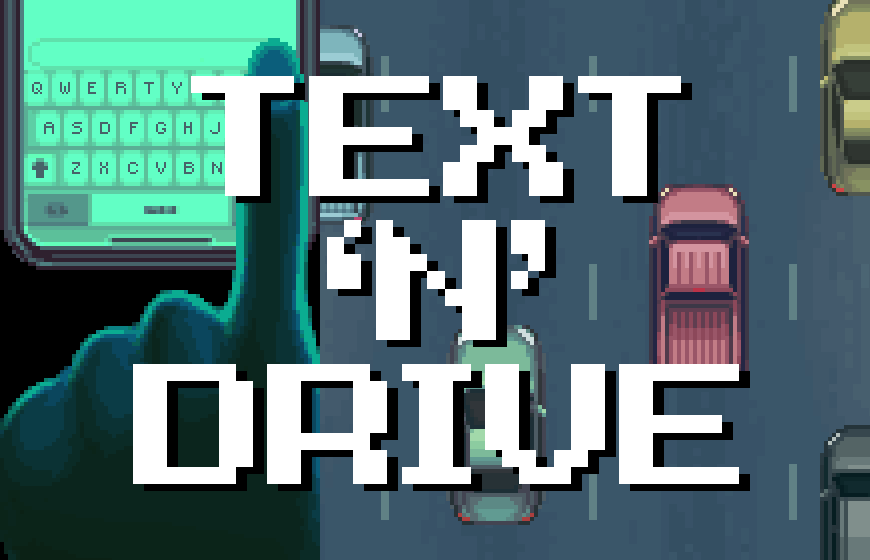
<style>
.page{position:relative;width:870px;height:560px}
.page>*{position:absolute;margin:0}
.t1{font:120px "A-Goblin-Appears!";letter-spacing:-0.022em;color:#ffffff}
</style>
<div class="page">
<p class="t1" style="left:133px;top:76px;width:606px;height:408px;text-align:center">TEXT<br>‘N’<br>DRIVE</p>
</div>
